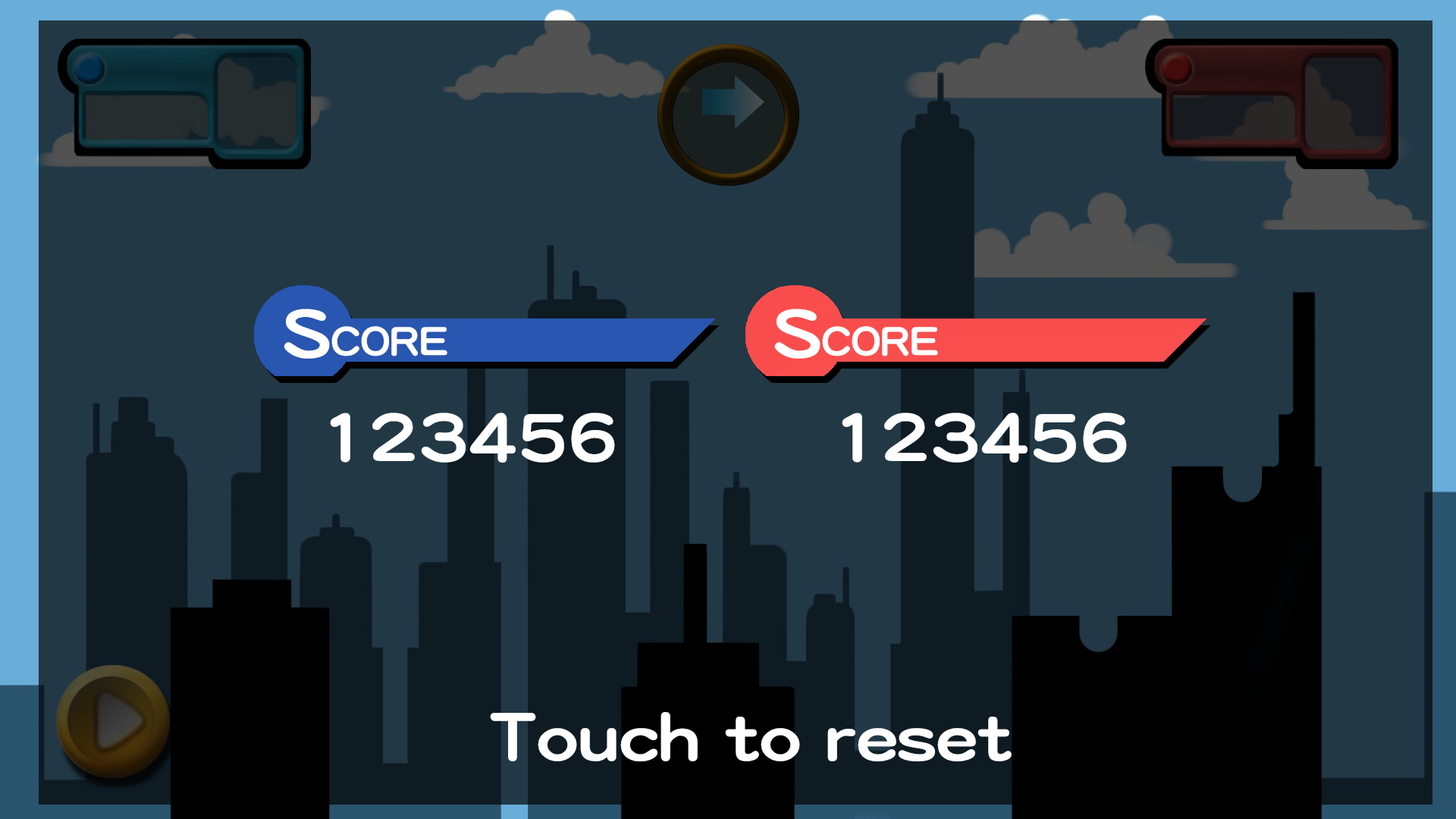
<style>
.page{position:relative;width:1456px;height:819px;background:#223845}
.page>*{position:absolute;margin:0}
.t1{font:42.5px "DFYuan-W8-WINP-BF";color:#ffffff}
.t2{font:71.3px "DFYuan-W8-WINP-BF";color:#ffffff}
</style>
<div class="page">
<p class="t1" style="left:284px;top:309px;width:163px;height:50px"><span class="t2">S</span>CORE</p>
<p class="t1" style="left:774px;top:309px;width:164px;height:50px"><span class="t2">S</span>CORE</p>
<p class="t2" style="left:330px;top:413px;width:285px;height:50px">123456</p>
<p class="t2" style="left:842px;top:413px;width:285px;height:50px">123456</p>
<p class="t2" style="left:490px;top:712px;width:522px;height:49px">Touch to reset</p>
</div>
